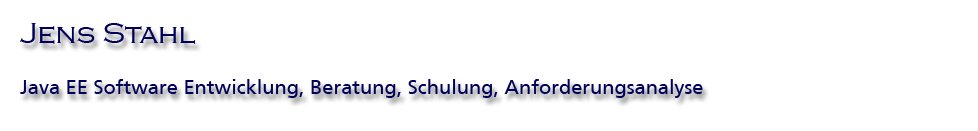
<style>
.page{position:relative;width:978px;height:131px;background:#ffffff}
.page>*{position:absolute;margin:0}
.t1{font:30px "CopperplateGothic-Light";color:#000058}
.t2{font:20px "Frutiger-Roman";color:#000058}
</style>
<div class="page">
<p class="t1" style="left:20px;top:23px;width:176px;height:21px">Jens Stahl</p>
<p class="t2" style="left:20px;top:79px;width:683px;height:19px">Java EE Software Entwicklung, Beratung, Schulung, Anforderungsanalyse</p>
</div>
